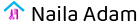
<style>
.page{position:relative;width:138px;height:24px;background:#ffffff}
.page>*{position:absolute;margin:0}
.t1{font:22.3px "Baloo2-Regular";color:#000000}
</style>
<div class="page">
<p class="t1" style="left:32px;top:6px;width:105px;height:15px">Naila Adam</p>
</div>
